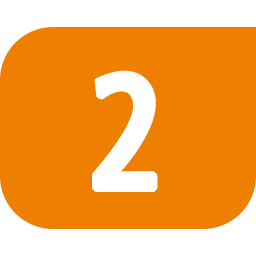
<style>
.page{position:relative;width:256px;height:256px;background:#ee7f01}
.page>*{position:absolute;margin:0}
.t1{font:160px "Frutiger-Cn";color:#ffffff;font-weight:bold}
</style>
<div class="page">
<p class="t1" style="left:94px;top:72px;width:62px;height:118px">2</p>
</div>
